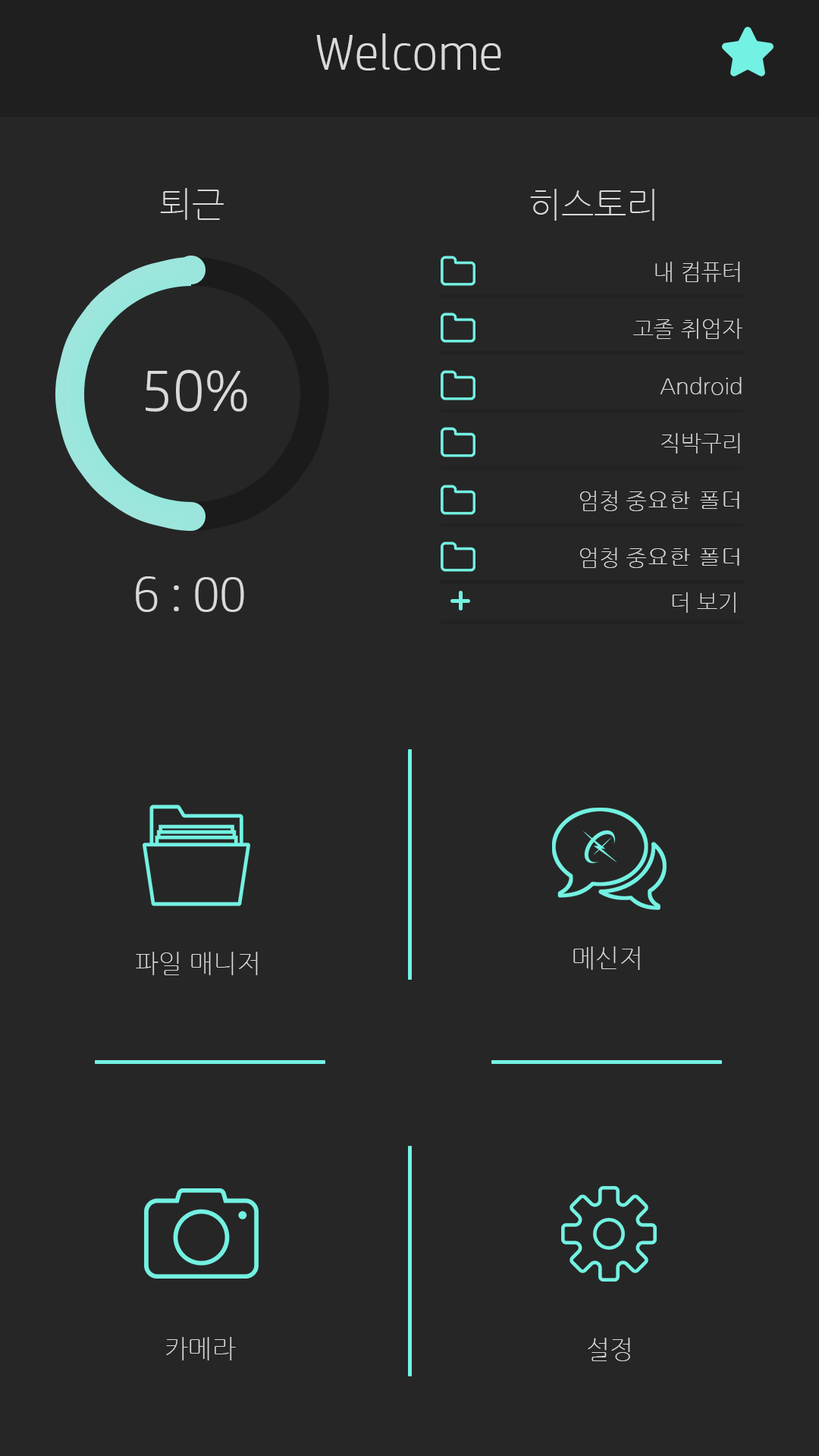
<style>
.page{position:relative;width:819px;height:1456px;background:#262626}
.page>*{position:absolute;margin:0}
.t1{font:50.6px "HPSimplified-Light";color:#d9d9d9}
.t2{font:34.6px "NanumGothicLight";color:#d9d9d9}
.t3{font:34.8px "NanumGothicLight";color:#d9d9d9}
.t4{font:22.1px "NanumGothicLight";color:#d9d9d9}
.t5{font:59.3px "HPSimplified-Light";color:#d9d9d9}
.t6{font:22.1px "Gulim";color:#d9d9d9}
.t7{font:25.3px "NanumGothicLight";color:#d9d9d9}
</style>
<div class="page">
<p class="t1" style="left:316px;top:33px;width:185px;height:38px">Welcome</p>
<p class="t2" style="left:160px;top:188px;width:64px;height:32px">퇴근</p>
<p class="t3" style="left:530px;top:189px;width:124px;height:32px">히스토리</p>
<p class="t4" style="left:655px;top:262px;width:85px;height:20px">내 컴퓨터</p>
<p class="t4" style="left:633px;top:318px;width:109px;height:21px">고졸 취업자</p>
<p class="t5" style="left:146px;top:369px;width:101px;height:43px">50%</p>
<p class="t4" style="left:660px;top:377px;width:82px;height:18px">Android</p>
<p class="t4" style="left:661px;top:433px;width:79px;height:20px">직박구리</p>
<p class="t6" style="left:580px;top:491px;width:159px;height:20px"><span class="t4">엄청 중</span>요한 폴더</p>
<p class="t6" style="left:580px;top:548px;width:159px;height:20px"><span class="t4">엄청 중</span>요한 폴더</p>
<p class="t1" style="left:136px;top:576px;width:108px;height:36px">6 : 00</p>
<p class="t4" style="left:672px;top:592px;width:64px;height:21px">더 보기</p>
<p class="t7" style="left:136px;top:952px;width:122px;height:23px">파일 매니저</p>
<p class="t7" style="left:573px;top:946px;width:67px;height:24px">메신저</p>
<p class="t7" style="left:166px;top:1337px;width:70px;height:23px">카메라</p>
<p class="t7" style="left:588px;top:1338px;width:42px;height:23px">설정</p>
</div>
